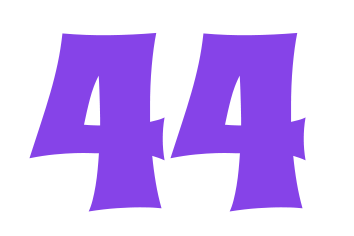
<style>
.page{position:relative;width:354px;height:236px;background:#ffffff}
.page>*{position:absolute;margin:0}
.t1{font:250px "SpicyRice-Regular";color:#8643e8}
</style>
<div class="page">
<p class="t1" style="left:29px;top:32px;width:277px;height:180px">44</p>
</div>
